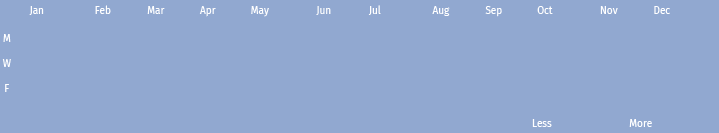
<style>
.page{position:relative;width:719px;height:133px;background:#91a8d0}
.page>*{position:absolute;margin:0}
.t1{font:10px "FiraSans-Regular";color:#ffffff}
.t2{font:10px "FiraSans-Regular";letter-spacing:-0.025em;color:#ffffff}
</style>
<div class="page">
<p class="t1" style="left:29px;top:6px;width:15px;height:9px">Jan</p>
<p class="t1" style="left:95px;top:5px;width:16px;height:9px">Feb</p>
<p class="t1" style="left:147px;top:6px;width:18px;height:8px">Mar</p>
<p class="t1" style="left:199px;top:6px;width:17px;height:11px">Apr</p>
<p class="t1" style="left:251px;top:6px;width:18px;height:11px">May</p>
<p class="t1" style="left:316px;top:6px;width:15px;height:9px">Jun</p>
<p class="t1" style="left:368px;top:5px;width:13px;height:10px">Jul</p>
<p class="t1" style="left:432px;top:6px;width:18px;height:10px">Aug</p>
<p class="t1" style="left:485px;top:6px;width:17px;height:11px">Sep</p>
<p class="t1" style="left:537px;top:6px;width:16px;height:8px">Oct</p>
<p class="t1" style="left:600px;top:6px;width:18px;height:8px">Nov</p>
<p class="t1" style="left:654px;top:6px;width:16px;height:8px">Dec</p>
<p class="t2" style="left:3px;top:34px;width:8px;height:8px">M</p>
<p class="t2" style="left:2px;top:59px;width:9px;height:8px">W</p>
<p class="t2" style="left:5px;top:84px;width:4px;height:8px">F</p>
<p class="t1" style="left:532px;top:119px;width:20px;height:8px">Less</p>
<p class="t1" style="left:629px;top:119px;width:23px;height:8px">More</p>
</div>
